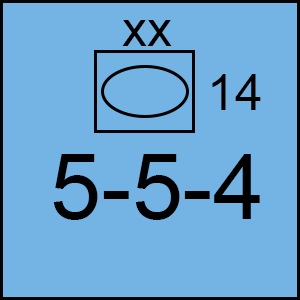
<style>
.page{position:relative;width:300px;height:300px;background:#74b4e4}
.page>*{position:absolute;margin:0}
.t1{font:50px "ArialMT";color:#000000}
.t2{font:91.7px "ArialMT";color:#000000}
</style>
<div class="page">
<p class="t1" style="left:122px;top:20px;width:50px;height:26px">xx</p>
<p class="t1" style="left:212px;top:74px;width:49px;height:36px">14</p>
<p class="t2" style="left:53px;top:154px;width:207px;height:66px">5-5-4</p>
</div>
